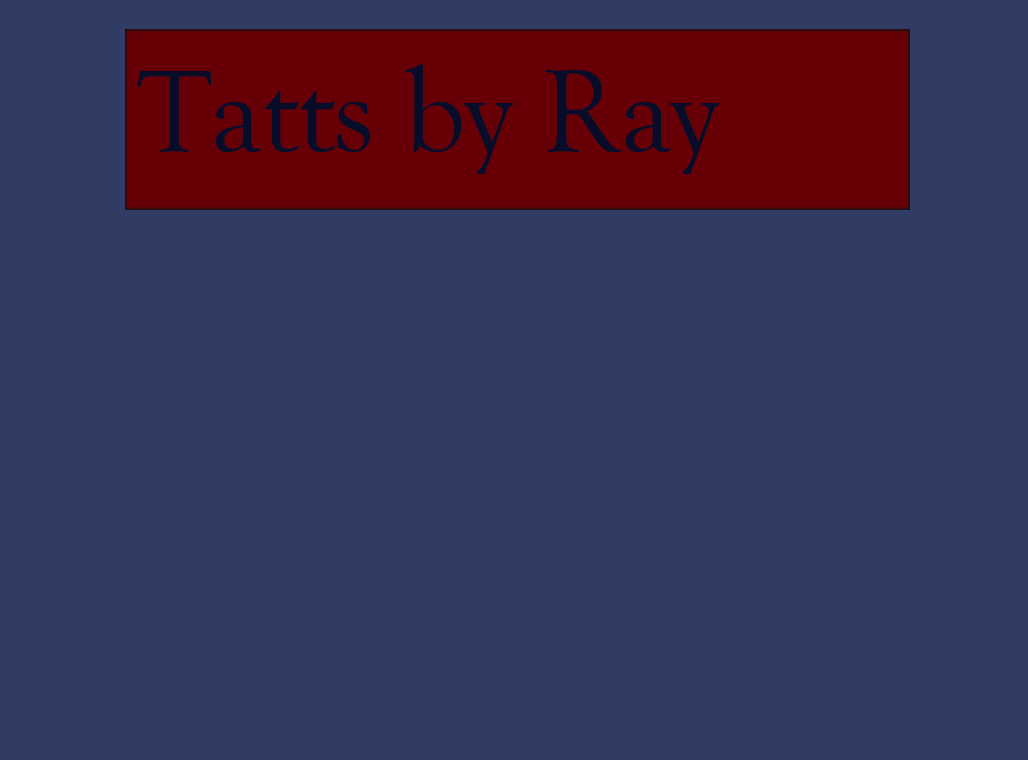
<style>
.page{position:relative;width:1028px;height:760px;background:#313c64}
.page>*{position:absolute;margin:0}
.t1{font:120px "GoudyOldStyleT-Regular";color:#070c28}
</style>
<div class="page">
<p class="t1" style="left:137px;top:64px;width:583px;height:110px">Tatts by Ray</p>
</div>
